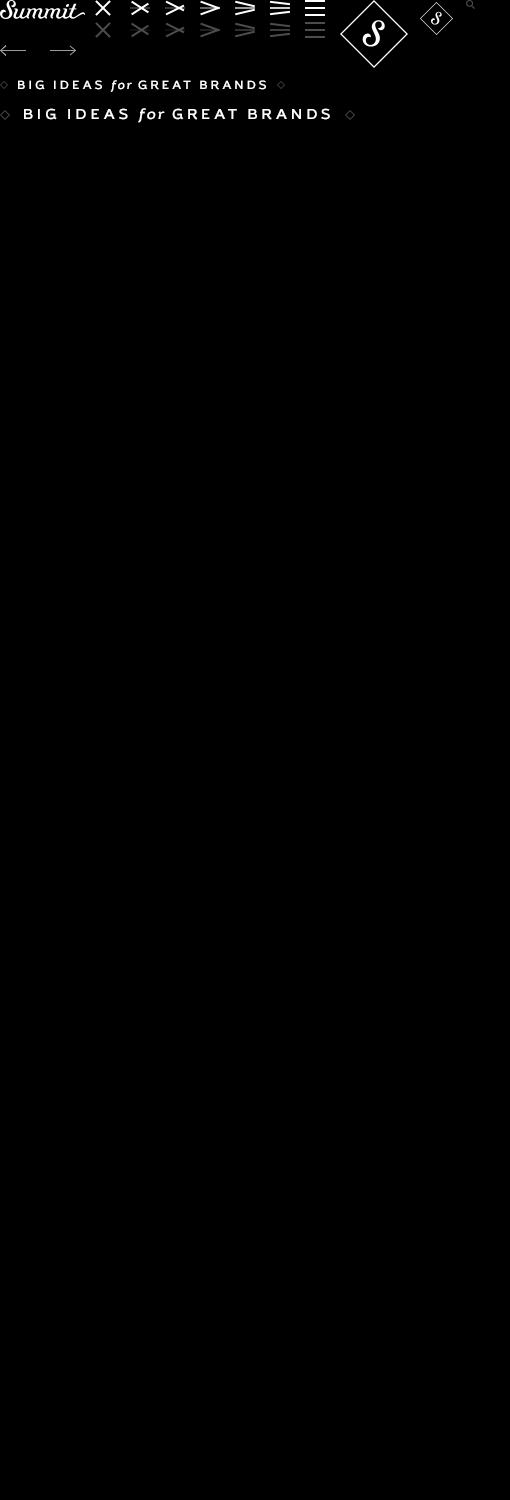
<style>
.page{position:relative;width:510px;height:1500px;background:#000000}
.page>*{position:absolute;margin:0}
.t1{font:11.8px "BriskoSansBold";letter-spacing:0.272em;color:#ffffff;text-transform:uppercase}
.t2{font:11.8px "BriskoSans-BoldItalic";letter-spacing:0.152em;color:#ffffff}
.t3{font:14.4px "BriskoSansBold";letter-spacing:0.272em;color:#ffffff;text-transform:uppercase}
.t4{font:14.4px "BriskoSans-BoldItalic";letter-spacing:0.152em;color:#ffffff}
</style>
<div class="page">
<p class="t1" style="left:18px;top:80px;width:248px;height:12px">big ideas <span class="t2">for</span> great brands</p>
<p class="t3" style="left:24px;top:108px;width:306px;height:15px">big ideas <span class="t4">for</span> great brands</p>
</div>
